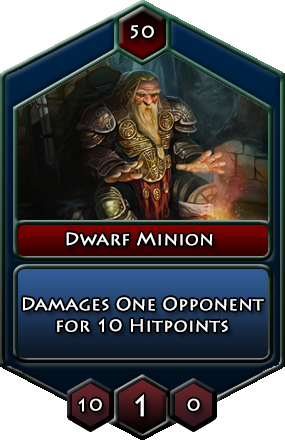
<style>
.page{position:relative;width:285px;height:440px}
.page>*{position:absolute;margin:0}
.t1{font:18px "LithosPro-Regular";color:#ffffff;font-weight:bold}
.t2{font:30px "LithosPro-Regular";color:#ffffff;font-weight:bold}
</style>
<div class="page">
<p class="t1" style="left:130px;top:25px;width:24px;height:14px">50</p>
<p class="t1" style="left:66px;top:232px;width:147px;height:14px">Dwarf Minion</p>
<p class="t1" style="left:23px;top:297px;width:241px;height:35px;text-align:center">Damages One Opponent<br>for 10 Hitpoints</p>
<p class="t1" style="left:78px;top:398px;width:24px;height:14px">10</p>
<p class="t2" style="left:135px;top:394px;width:9px;height:23px">1</p>
<p class="t1" style="left:187px;top:398px;width:13px;height:13px">0</p>
</div>
